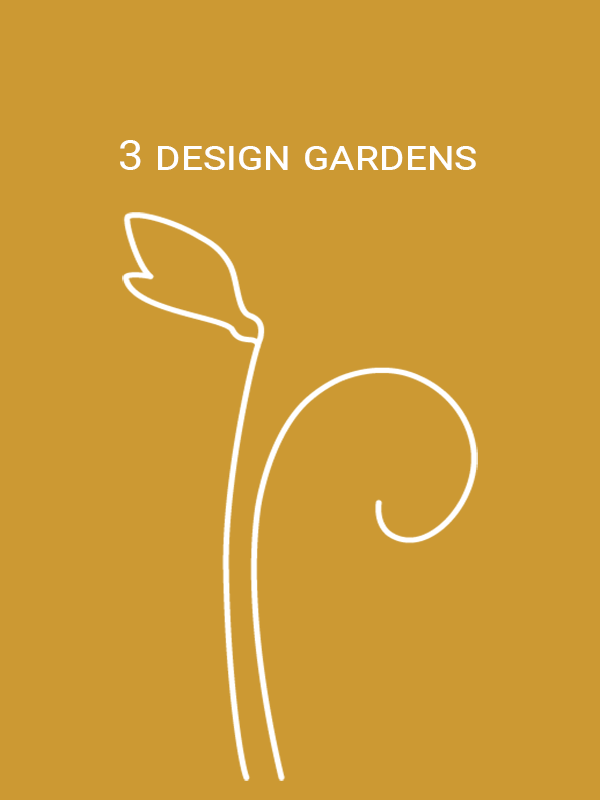
<style>
.page{position:relative;width:600px;height:800px;background:#cc9933}
.page>*{position:absolute;margin:0}
.t1{font:41.7px "Roboto-Regular";color:#ffffff;font-variant:small-caps;scale:1.09 1}
</style>
<div class="page">
<p class="t1" style="left:120px;top:140px;width:356px;height:30px">3 design gardens</p>
</div>
